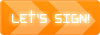
<style>
.page{position:relative;width:100px;height:35px}
.page>*{position:absolute;margin:0}
.t1{font:15px "Klondike";color:#ffffff}
</style>
<div class="page">
<p class="t1" style="left:12px;top:10px;width:78px;height:13px">LET’S SIGN!</p>
</div>
